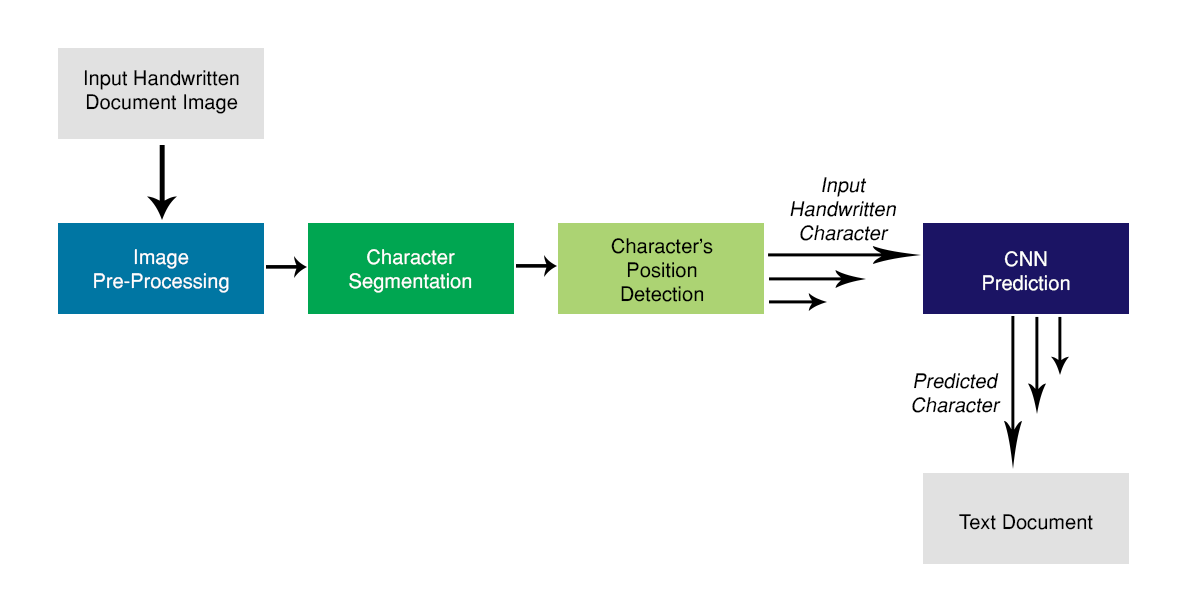
<style>
.page{position:relative;width:1200px;height:600px;background:#ffffff}
.page>*{position:absolute;margin:0}
.t1{font:20px "Helvetica-Normal";color:#000000}
.t2{font:20px "Helvetica-Normal";color:#000000;font-style:italic}
.t3{font:20px "Helvetica-Normal";color:#fefefe}
.t4{font:20px "Helvetica-Normal";color:#ffffff}
</style>
<div class="page">
<p class="t1" style="left:84px;top:70px;width:155px;height:44px;text-align:center">Input Handwritten<br>Document Image</p>
<p class="t2" style="left:790px;top:177px;width:107px;height:64px;text-align:center">Input<br>Handwritten<br>Character</p>
<p class="t1" style="left:611px;top:238px;width:102px;height:64px;text-align:center">Character’s<br>Position<br>Detection</p>
<p class="t3" style="left:94px;top:249px;width:135px;height:44px;text-align:center">Image<br>Pre-Processing</p>
<p class="t4" style="left:349px;top:249px;width:123px;height:44px;text-align:center">Character<br>Segmentation</p>
<p class="t4" style="left:983px;top:251px;width:87px;height:40px;text-align:center">CNN<br>Prediction</p>
<p class="t2" style="left:912px;top:373px;width:89px;height:40px;text-align:center">Predicted<br>Character</p>
<p class="t1" style="left:959px;top:514px;width:134px;height:16px">Text Document</p>
</div>
